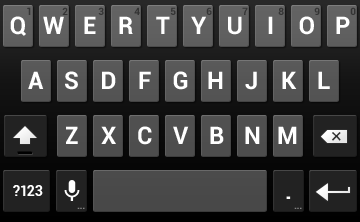
<style>
.page{position:relative;width:360px;height:222px}
.page>*{position:absolute;margin:0}
.t1{font:24px "Roboto-Bold";color:#ffffff}
.t2{font:10px "Roboto-Bold";color:#282828}
.t3{font:14px "Roboto-Bold";color:#ffffff}
.t4{font:10px "Roboto-Bold";letter-spacing:-0.025em;color:#848484}
</style>
<div class="page">
<p class="t1" style="left:10px;top:16px;width:16px;height:20px">Q</p>
<p class="t2" style="left:27px;top:7px;width:4px;height:8px;opacity:0.8">1</p>
<p class="t1" style="left:43px;top:16px;width:21px;height:18px">W</p>
<p class="t2" style="left:62px;top:7px;width:6px;height:8px;opacity:0.8">2</p>
<p class="t1" style="left:84px;top:16px;width:12px;height:18px">E</p>
<p class="t2" style="left:98px;top:7px;width:6px;height:8px;opacity:0.8">3</p>
<p class="t1" style="left:119px;top:16px;width:14px;height:18px">R</p>
<p class="t2" style="left:134px;top:7px;width:6px;height:8px;opacity:0.8">4</p>
<p class="t1" style="left:156px;top:16px;width:14px;height:18px">T</p>
<p class="t2" style="left:170px;top:7px;width:6px;height:8px;opacity:0.8">5</p>
<p class="t1" style="left:191px;top:16px;width:15px;height:18px">Y</p>
<p class="t2" style="left:206px;top:7px;width:6px;height:8px;opacity:0.8">6</p>
<p class="t1" style="left:228px;top:16px;width:14px;height:19px">U</p>
<p class="t2" style="left:242px;top:7px;width:6px;height:8px;opacity:0.8">7</p>
<p class="t1" style="left:268px;top:16px;width:5px;height:18px">I</p>
<p class="t2" style="left:278px;top:7px;width:6px;height:8px;opacity:0.8">8</p>
<p class="t1" style="left:299px;top:16px;width:15px;height:19px">O</p>
<p class="t2" style="left:314px;top:7px;width:6px;height:8px;opacity:0.8">9</p>
<p class="t1" style="left:336px;top:16px;width:14px;height:18px">P</p>
<p class="t2" style="left:350px;top:7px;width:6px;height:8px;opacity:0.8">0</p>
<p class="t1" style="left:28px;top:71px;width:16px;height:18px">A</p>
<p class="t1" style="left:65px;top:71px;width:13px;height:19px">S</p>
<p class="t1" style="left:102px;top:71px;width:14px;height:18px">D</p>
<p class="t1" style="left:139px;top:71px;width:12px;height:18px">F</p>
<p class="t1" style="left:173px;top:71px;width:15px;height:19px">G</p>
<p class="t1" style="left:208px;top:71px;width:15px;height:18px">H</p>
<p class="t1" style="left:245px;top:71px;width:12px;height:19px">J</p>
<p class="t1" style="left:282px;top:71px;width:15px;height:18px">K</p>
<p class="t1" style="left:318px;top:71px;width:12px;height:18px">L</p>
<p class="t1" style="left:66px;top:126px;width:12px;height:18px">Z</p>
<p class="t1" style="left:101px;top:126px;width:15px;height:18px">X</p>
<p class="t1" style="left:138px;top:126px;width:14px;height:19px">C</p>
<p class="t1" style="left:173px;top:126px;width:16px;height:18px">V</p>
<p class="t1" style="left:210px;top:126px;width:14px;height:18px">B</p>
<p class="t1" style="left:245px;top:126px;width:15px;height:18px">N</p>
<p class="t1" style="left:278px;top:126px;width:19px;height:18px">M</p>
<p class="t3" style="left:13px;top:185px;width:30px;height:11px">?123</p>
<p class="t1" style="left:286px;top:196px;width:5px;height:3px">.</p>
<p class="t4" style="left:77px;top:207px;width:8px;height:2px">...</p>
<p class="t4" style="left:294px;top:207px;width:8px;height:2px">...</p>
</div>
